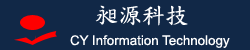
<style>
.page{position:relative;width:250px;height:50px;background:#112847}
.page>*{position:absolute;margin:0}
.t1{font:23.3px "DFKaiShu-SB-Estd-BF";color:#ffffff}
.t2{font:13.3px "ArialMT";color:#ffffff}
</style>
<div class="page">
<p class="t1" style="left:95px;top:5px;width:93px;height:21px">昶源科技</p>
<p class="t2" style="left:70px;top:35px;width:160px;height:13px">CY Information Technology</p>
</div>
